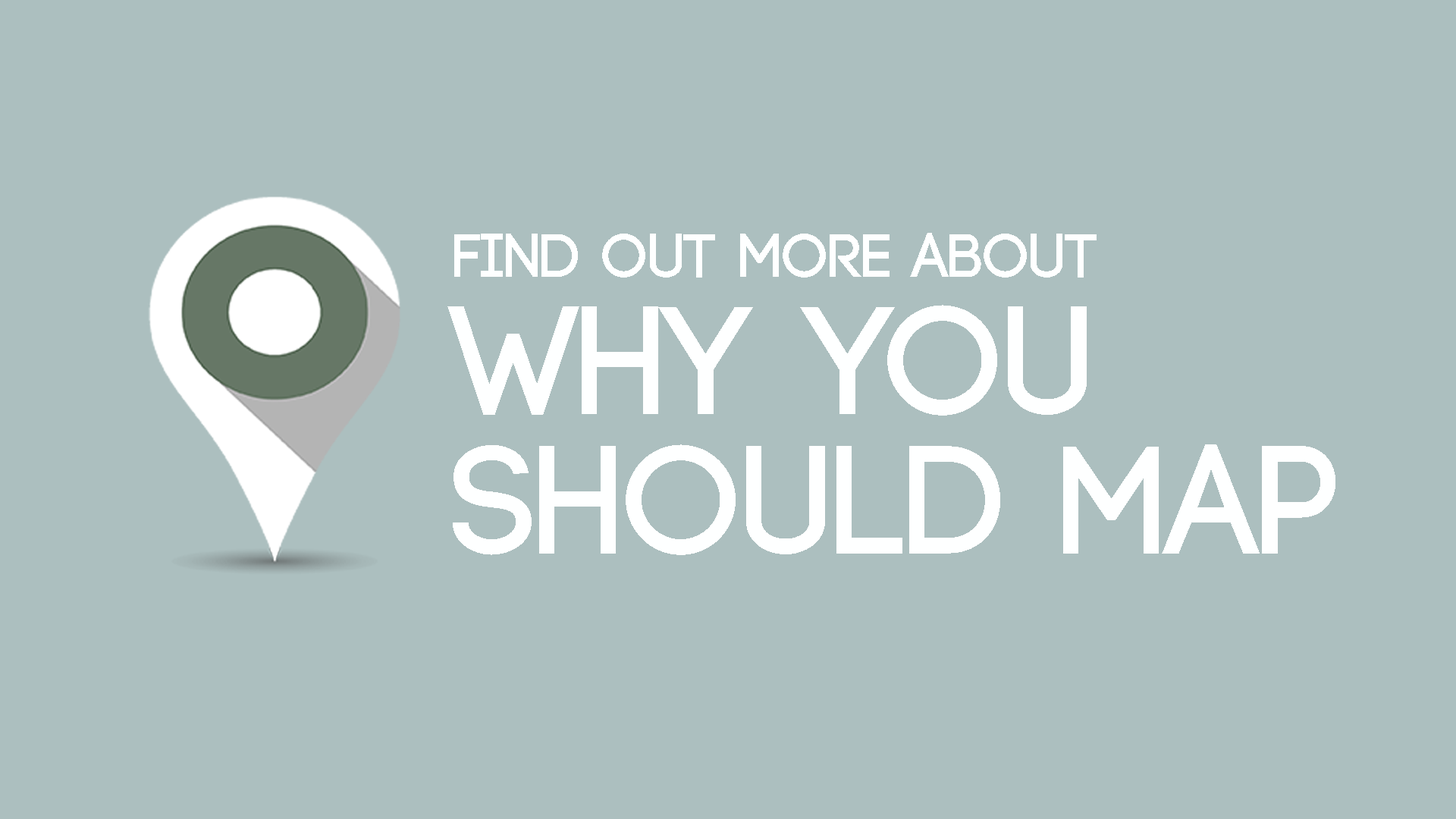
<style>
.page{position:relative;width:1456px;height:819px;background:#acbfbf}
.page>*{position:absolute;margin:0}
.t1{font:61.3px "Code-Bold";color:#feffff}
.t2{font:153.7px/139.3px "Code-Bold";color:#feffff}
</style>
<div class="page">
<p class="t1" style="left:454px;top:233px;width:643px;height:45px">FIND OUT MORE ABOUT</p>
<p class="t2" style="left:447px;top:305px;width:888px;height:250px">WHY YOU <br>SHOULD MAP</p>
</div>
